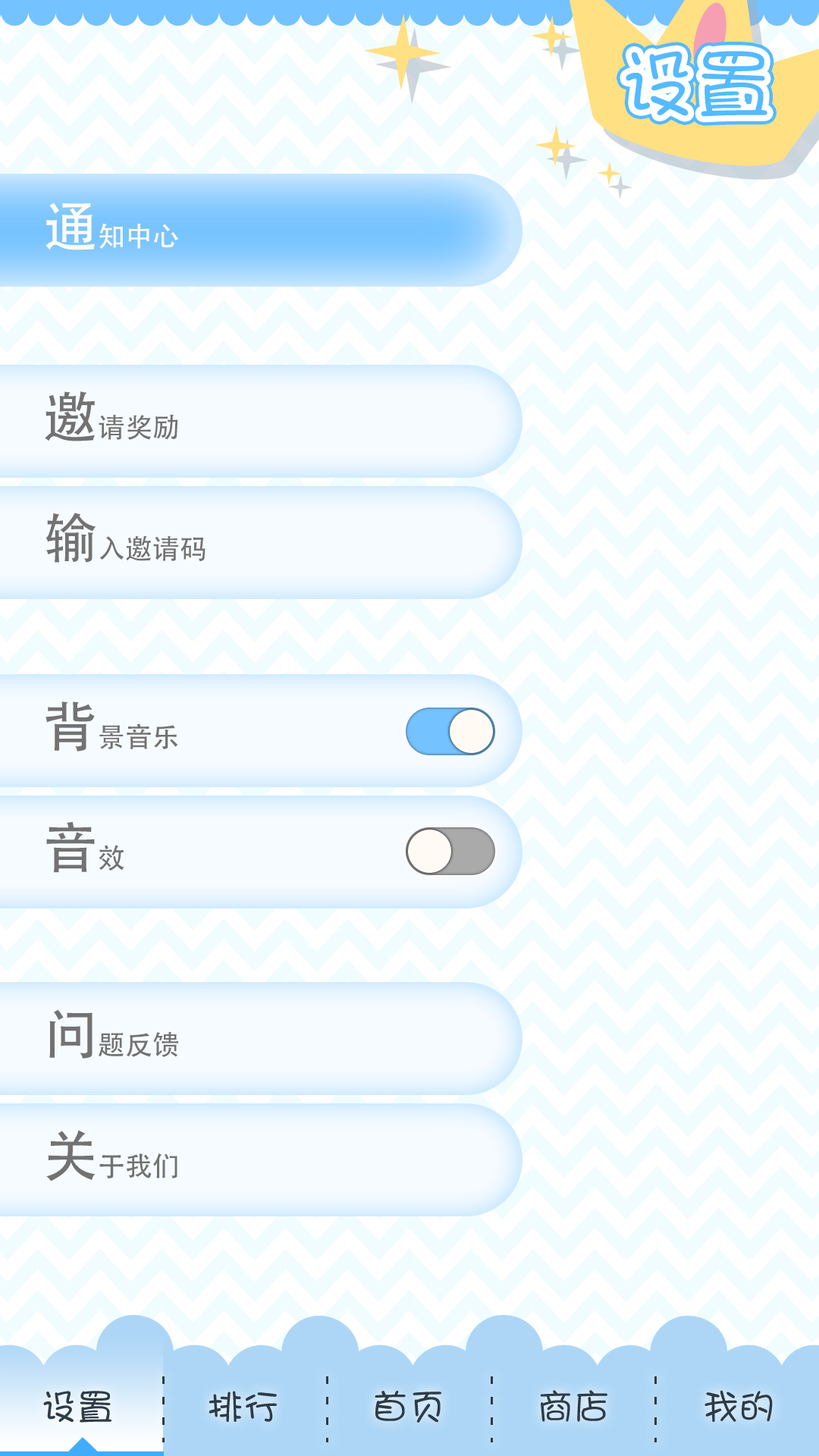
<style>
.page{position:relative;width:819px;height:1456px;background:#ffffff}
.page>*{position:absolute;margin:0}
.t1{font:75.8px "DFShaoNvW5";color:#55baff}
.t2{font:27.3px "AdobeHeitiStd-Regular";color:#fffbf4}
.t3{font:54.6px "AdobeHeitiStd-Regular";color:#fffbf4}
.t4{font:27.3px "AdobeHeitiStd-Regular";color:#727272}
.t5{font:54.6px "AdobeHeitiStd-Regular";color:#727272}
.t6{font:36.4px "DFShaoNvW5";color:#2d3b47}
</style>
<div class="page">
<p class="t1" style="left:626px;top:51px;width:141px;height:66px">设置</p>
<p class="t2" style="left:45px;top:202px;width:133px;height:48px"><span class="t3">通</span>知中心</p>
<p class="t4" style="left:45px;top:391px;width:133px;height:50px"><span class="t5">邀</span>请奖励</p>
<p class="t4" style="left:45px;top:513px;width:161px;height:50px"><span class="t5">输</span>入邀请码</p>
<p class="t4" style="left:45px;top:701px;width:133px;height:50px"><span class="t5">背</span>景音乐</p>
<p class="t5" style="left:46px;top:821px;width:78px;height:52px">音<span class="t4">效</span></p>
<p class="t4" style="left:49px;top:1009px;width:129px;height:50px"><span class="t5">问</span>题反馈</p>
<p class="t4" style="left:46px;top:1130px;width:131px;height:51px"><span class="t5">关</span>于我们</p>
<p class="t6" style="left:43px;top:1391px;width:68px;height:32px">设置</p>
<p class="t6" style="left:209px;top:1391px;width:68px;height:31px">排行</p>
<p class="t6" style="left:375px;top:1391px;width:66px;height:32px">首页</p>
<p class="t6" style="left:540px;top:1390px;width:67px;height:32px">商店</p>
<p class="t6" style="left:704px;top:1390px;width:69px;height:32px">我的</p>
</div>
